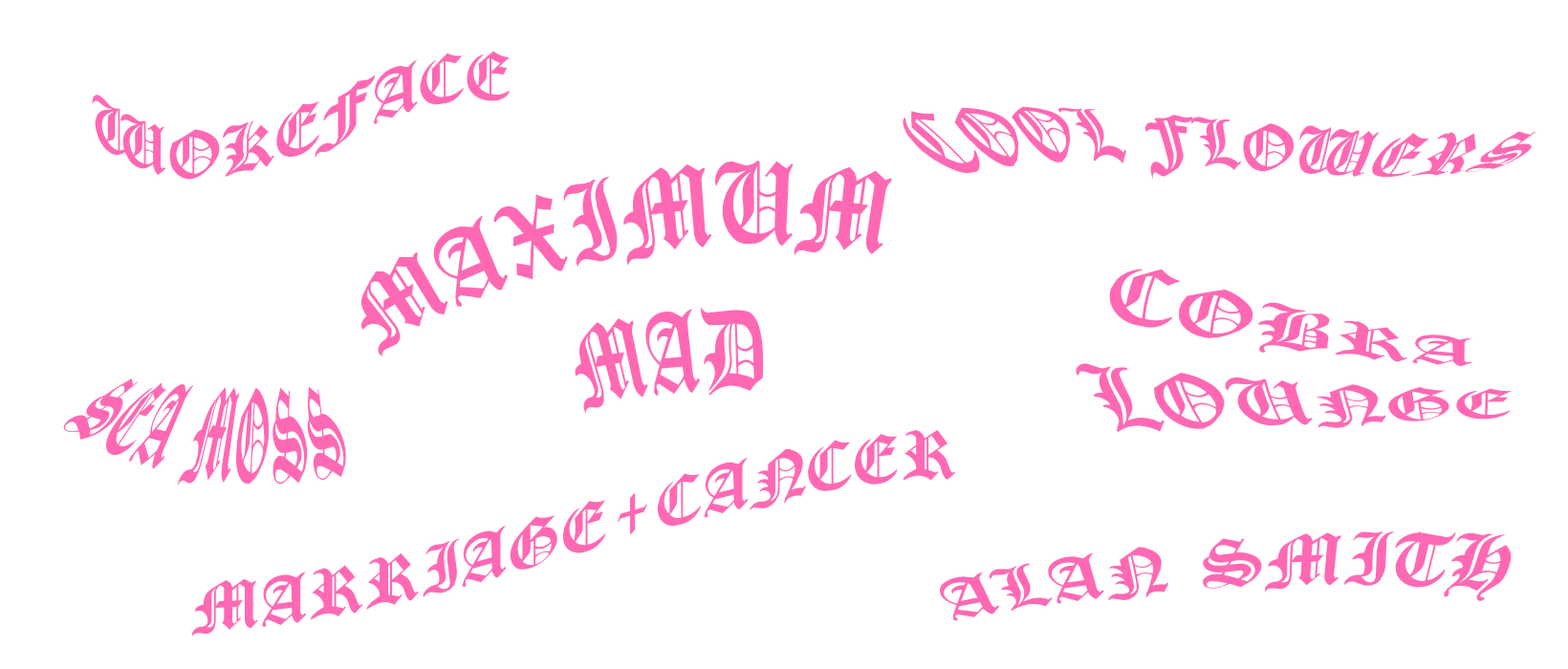
<style>
.page{position:relative;width:1568px;height:669px;background:#ffffff}
.page>*{position:absolute;margin:0}
.t1{font:71.7px "CloisterBlack-Light";color:#ff69b4}
</style>
<div class="page">
<p class="t1" style="left:92px;top:51px;width:418px;height:129px">WOKEFACE</p>
<p class="t1" style="left:903px;top:106px;width:633px;height:74px">COOL FLOWERS</p>
<p class="t1" style="left:360px;top:161px;width:532px;height:253px">MAXIMUM<br>     MAD</p>
<p class="t1" style="left:1076px;top:269px;width:437px;height:163px">COBRA<br>LOUNGE</p>
<p class="t1" style="left:63px;top:379px;width:283px;height:108px">SEA MOSS</p>
<p class="t1" style="left:192px;top:429px;width:763px;height:208px">MARRIAGE+CANCER</p>
<p class="t1" style="left:939px;top:532px;width:573px;height:89px">ALAN SMITH</p>
</div>
